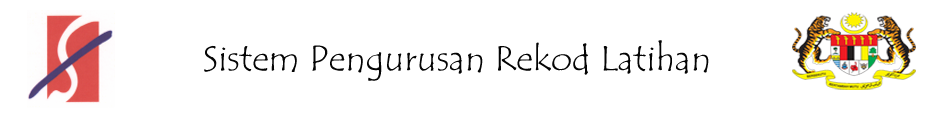
<style>
.page{position:relative;width:951px;height:120px;background:#ffffff}
.page>*{position:absolute;margin:0}
.t1{font:36px "TempusSansITC";color:#040404}
</style>
<div class="page">
<p class="t1" style="left:204px;top:40px;width:505px;height:41px">Sistem Pengurusan Rekod Latihan</p>
</div>
